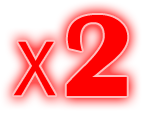
<style>
.page{position:relative;width:145px;height:113px;background:#fe0000}
.page>*{position:absolute;margin:0}
.t1{font:100px "HGGothicM";color:#fe0000}
.t2{font:120px "BritannicBold";color:#fe0000}
</style>
<div class="page">
<p class="t1" style="left:13px;top:15px;width:115px;height:81px">x<span class="t2">2</span></p>
</div>
